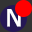
<style>
.page{position:relative;width:32px;height:32px;background:#251755}
.page>*{position:absolute;margin:0}
.t1{font:22.7px "Verdana";letter-spacing:0.05em;color:#ffffff;font-weight:bold}
</style>
<div class="page">
<p class="t1" style="left:7px;top:9px;width:14px;height:18px">N</p>
</div>
